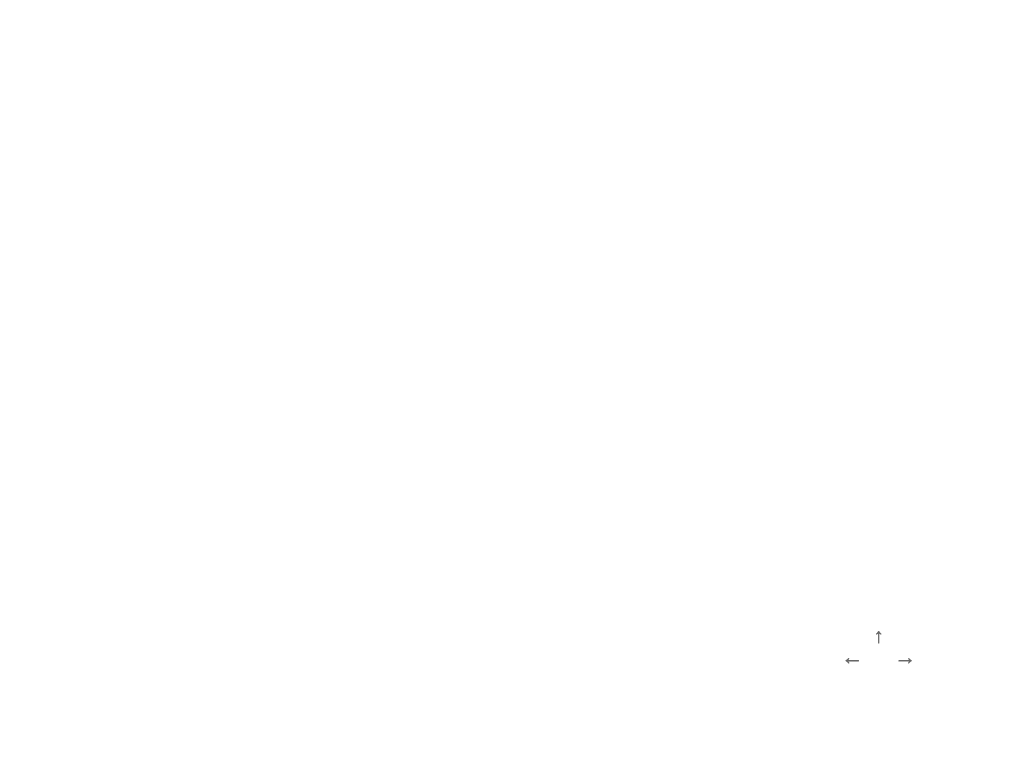
<style>
.page{position:relative;width:1024px;height:768px;background:#ffffff}
.page>*{position:absolute;margin:0}
.t1{font:14px "ArialMT";color:#666666;font-weight:bold}
.t2{font:14px "Arial-BoldMT";color:#666666;font-weight:bold}
</style>
<div class="page">
<p class="t1" style="left:876px;top:631px;width:6px;height:13px">↑</p>
<p class="t1" style="left:845px;top:658px;width:14px;height:6px">←</p>
<p class="t2" style="left:898px;top:658px;width:14px;height:6px">→</p>
</div>
